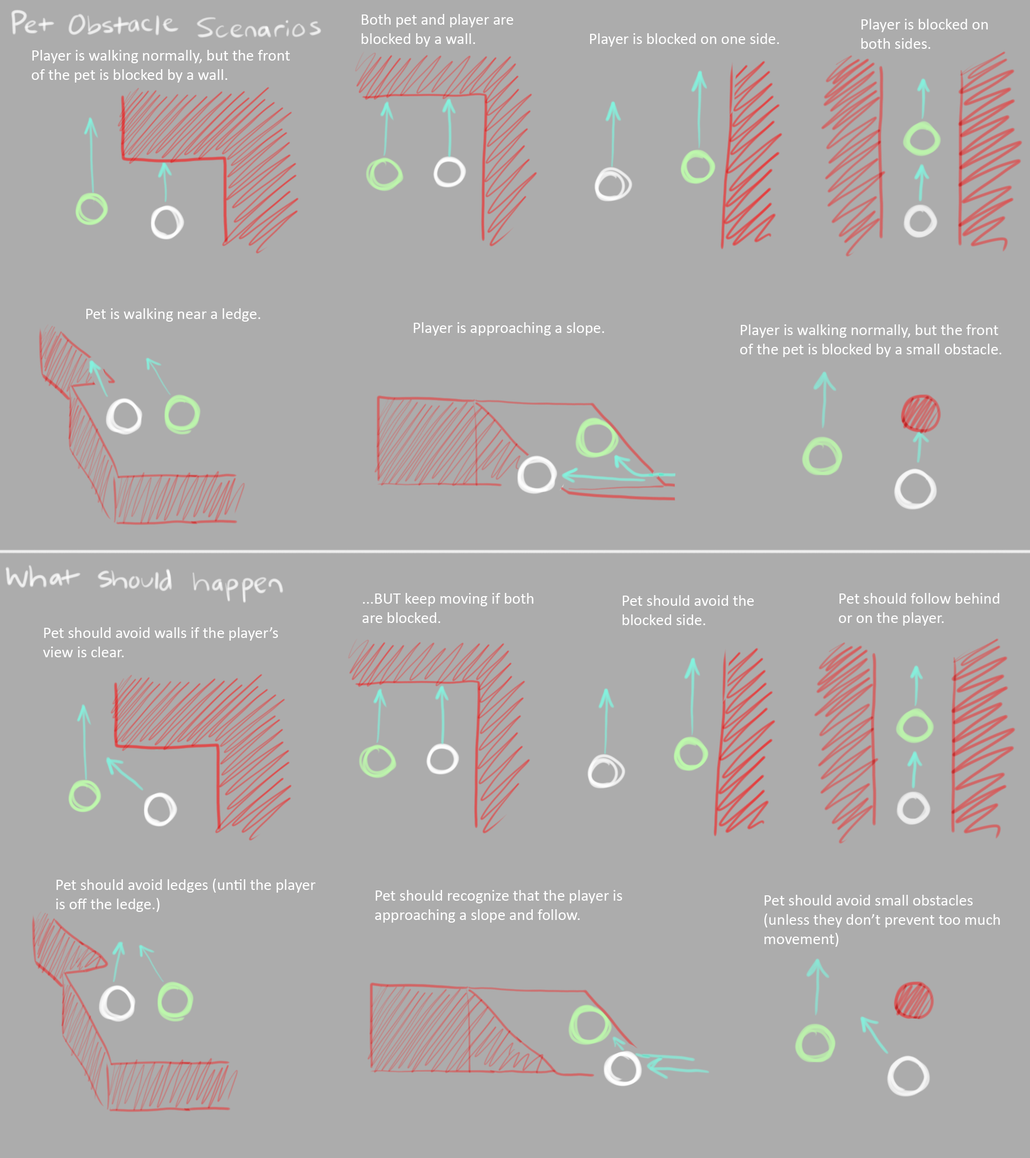
<style>
.page{position:relative;width:1030px;height:1158px;background:#acacac}
.page>*{position:absolute;margin:0}
.t1{font:16.1px "Calibri";color:#ffffff}
</style>
<div class="page">
<p class="t1" style="left:361px;top:14px;width:152px;height:33px">Both pet and player are<br>blocked by a wall.</p>
<p class="t1" style="left:861px;top:19px;width:127px;height:30px">Player is blocked on<br>both sides.</p>
<p class="t1" style="left:590px;top:33px;width:189px;height:14px">Player is blocked on one side.</p>
<p class="t1" style="left:32px;top:50px;width:258px;height:33px">Player is walking normally, but the front<br>of the pet is blocked by a wall.</p>
<p class="t1" style="left:86px;top:308px;width:174px;height:14px">Pet is walking near a ledge.</p>
<p class="t1" style="left:413px;top:322px;width:191px;height:14px">Player is approaching a slope.</p>
<p class="t1" style="left:739px;top:324px;width:262px;height:33px">Player is walking normally, but the front<br>of the pet is blocked by a small obstacle.</p>
<p class="t1" style="left:362px;top:593px;width:172px;height:30px">...BUT keep moving if both<br>are blocked.</p>
<p class="t1" style="left:838px;top:593px;width:161px;height:33px">Pet should follow behind<br>or on the player.</p>
<p class="t1" style="left:622px;top:595px;width:131px;height:30px">Pet should avoid the<br>blocked side.</p>
<p class="t1" style="left:43px;top:627px;width:235px;height:30px">Pet should avoid walls if the player’s<br>view is clear.</p>
<p class="t1" style="left:56px;top:879px;width:259px;height:33px">Pet should avoid ledges (until the player<br>is off the ledge.)</p>
<p class="t1" style="left:375px;top:890px;width:247px;height:33px">Pet should recognize that the player is<br>approaching a slope and follow.</p>
<p class="t1" style="left:764px;top:895px;width:236px;height:52px">Pet should avoid small obstacles<br>(unless they don’t prevent too much<br>movement)</p>
</div>
